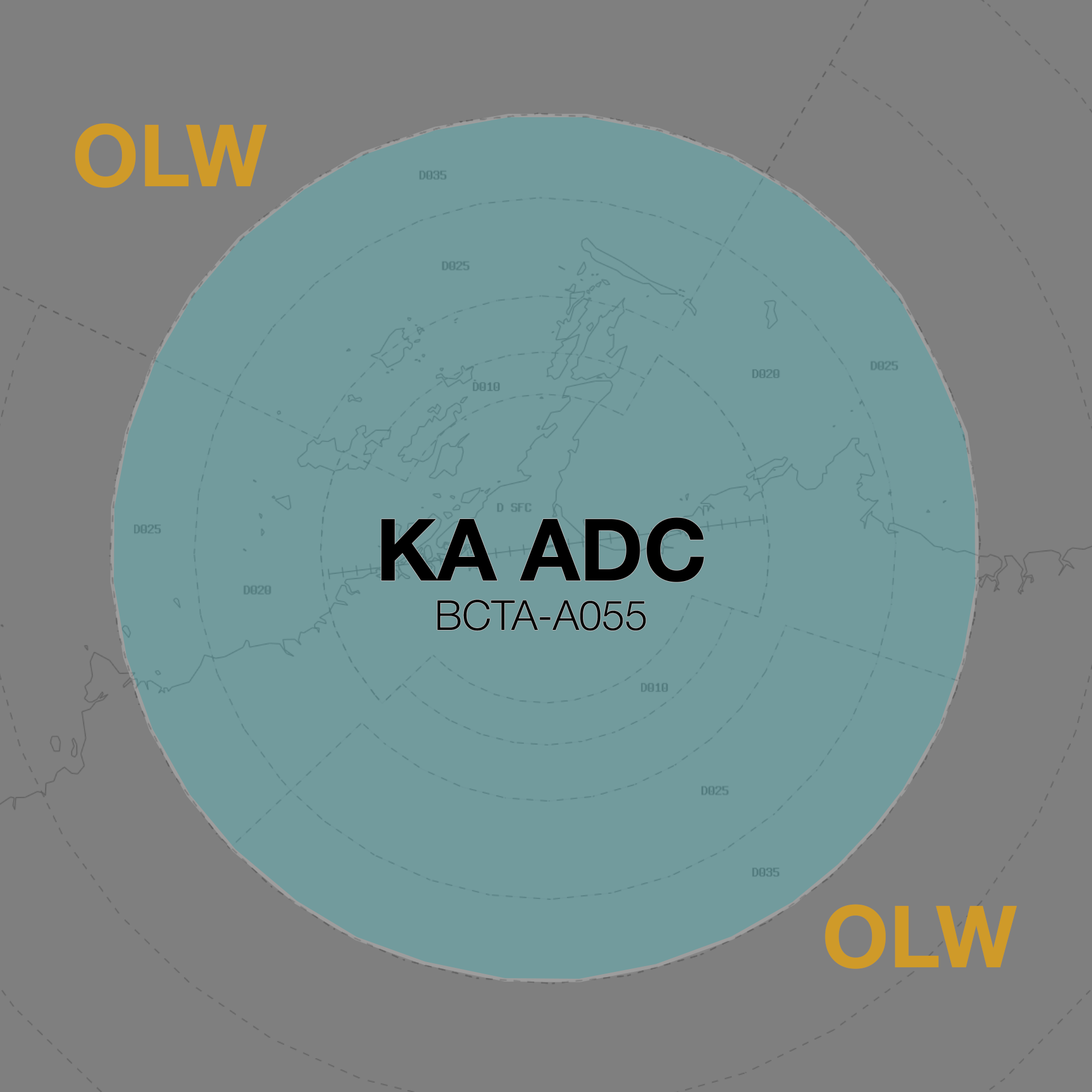
<style>
.page{position:relative;width:1092px;height:1092px;background:#7f7f7f}
.page>*{position:absolute;margin:0}
.t1{font:86.2px "HelveticaNeue-Bold";color:#cf9a29}
.t2{font:41.4px "HelveticaNeue-Light";color:#000000}
.t3{font:86.2px "HelveticaNeue-Bold";color:#000000}
</style>
<div class="page">
<p class="t1" style="left:75px;top:123px;width:192px;height:65px">OLW</p>
<p class="t2" style="left:381px;top:517px;width:323px;height:114px;text-align:center"><span class="t3">KA ADC<br></span>BCTA-A055</p>
<p class="t1" style="left:825px;top:904px;width:192px;height:65px">OLW</p>
</div>
